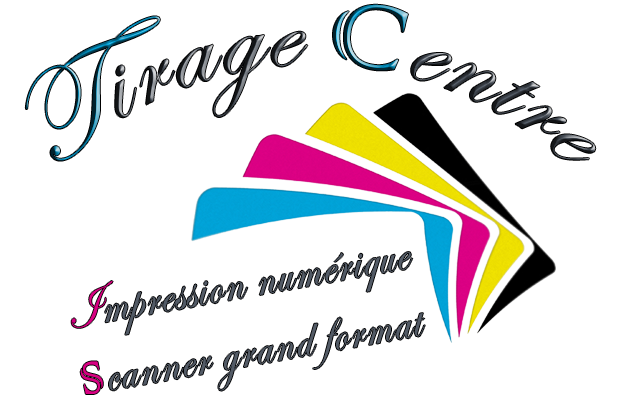
<style>
.page{position:relative;width:622px;height:411px;background:#ffffff}
.page>*{position:absolute;margin:0}
.t1{font:121.1px "EdwardianScriptITC";letter-spacing:0.04em;scale:0.83 1}
.t2{font:121.1px "ColonnaMT";letter-spacing:0.04em;scale:0.83 1}
.t3{font:59.7px "EdwardianScriptITC";letter-spacing:0.04em;color:#535b66;scale:0.83 1}
.t4{font:59.7px "EdwardianScriptITC";letter-spacing:0.04em;color:#d80082;scale:0.83 1}
.t5{font:59.7px "ColonnaMT";letter-spacing:0.04em;color:#d80082;scale:0.83 1}
</style>
<div class="page">
<p class="t1" style="left:25px;top:4px;width:571px;height:157px">Tirage <span class="t2">C</span>entre</p>
<p class="t3" style="left:71px;top:252px;width:342px;height:83px;rotate:-10deg"><span class="t4">I</span>mpression numérique</p>
<p class="t3" style="left:80px;top:313px;width:345px;height:81px;rotate:-10deg"><span class="t5">S</span>canner grand format</p>
</div>
